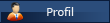
<style>
.page{position:relative;width:110px;height:23px;background:#2b4d7b}
.page>*{position:absolute;margin:0}
.t1{font:11px "Verdana";color:#efefef}
</style>
<div class="page">
<p class="t1" style="left:47px;top:7px;width:27px;height:9px">Profil</p>
</div>
